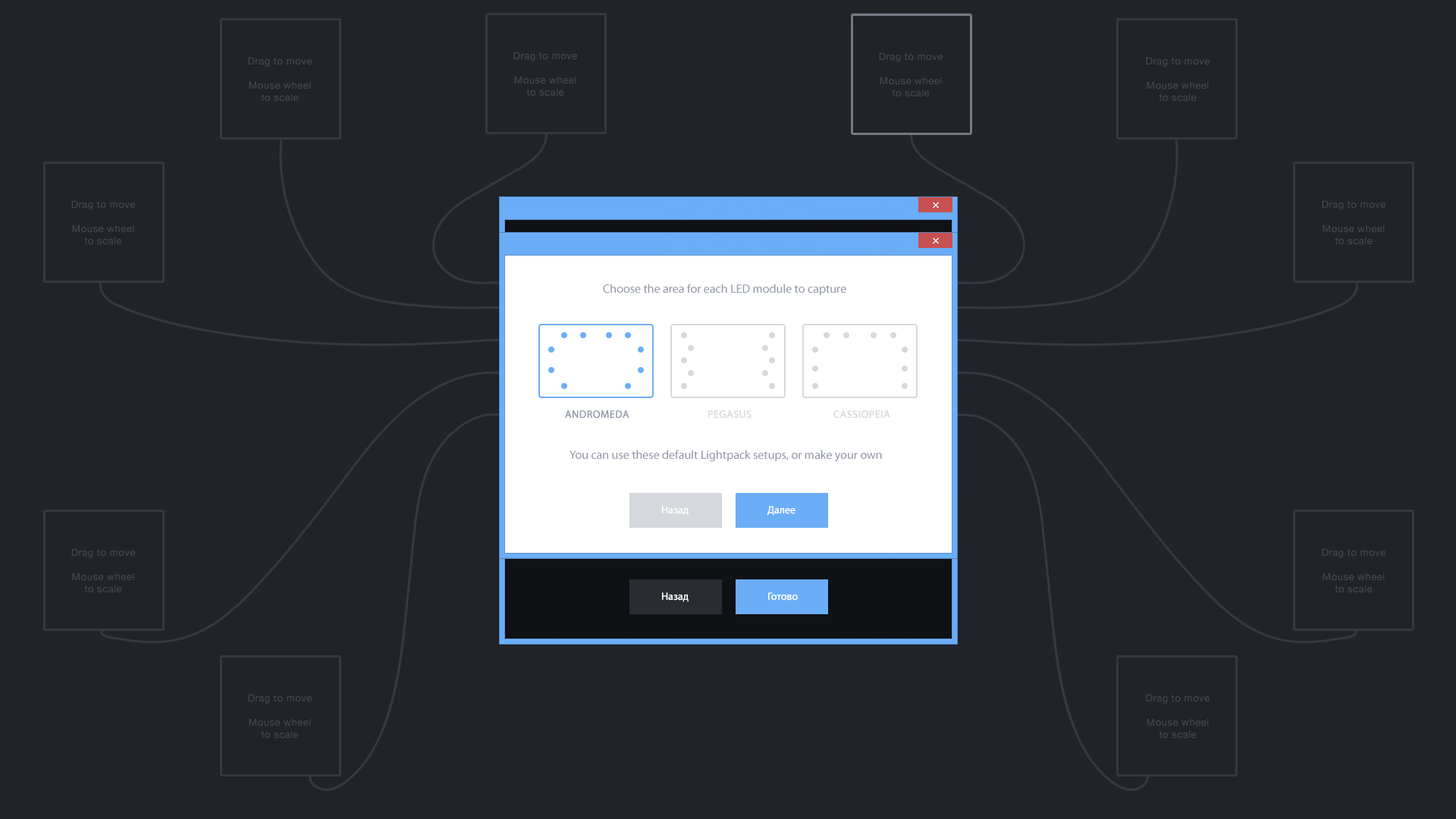
<style>
.page{position:relative;width:1456px;height:819px;background:#202328}
.page>*{position:absolute;margin:0}
.t1{font:9.9px/4.5px "HelveticaNeue";letter-spacing:0.04em;color:#444952}
.t2{font:12.1px "MyriadPro-Regular";color:#8f96a4}
.t3{font:10.6px "MyriadPro-Regular";letter-spacing:0.04em;color:#8f96a4;text-transform:uppercase}
.t4{font:10.6px "MyriadPro-Regular";letter-spacing:0.04em;color:#d5d8dd;text-transform:uppercase}
.t5{font:10.6px "MyriadPro-Regular";color:#ffffff}
</style>
<div class="page">
<p class="t1" style="left:513px;top:52px;width:64px;height:44px;text-align:center">Drag to move<br><br>Mouse wheel<br>to scale</p>
<p class="t1" style="left:879px;top:52px;width:64px;height:45px;text-align:center">Drag to move<br><br>Mouse wheel<br>to scale</p>
<p class="t1" style="left:248px;top:57px;width:64px;height:45px;text-align:center">Drag to move<br><br>Mouse wheel<br>to scale</p>
<p class="t1" style="left:1146px;top:57px;width:64px;height:45px;text-align:center">Drag to move<br><br>Mouse wheel<br>to scale</p>
<p class="t1" style="left:71px;top:200px;width:64px;height:45px;text-align:center">Drag to move<br><br>Mouse wheel<br>to scale</p>
<p class="t1" style="left:1322px;top:200px;width:63px;height:45px;text-align:center">Drag to move<br><br>Mouse wheel<br>to scale</p>
<p class="t2" style="left:603px;top:284px;width:243px;height:12px">Choose the area for each LED module to capture</p>
<p class="t3" style="left:565px;top:410px;width:64px;height:9px">Andromeda</p>
<p class="t4" style="left:708px;top:410px;width:43px;height:9px">Pegasus</p>
<p class="t4" style="left:833px;top:410px;width:57px;height:9px">Cassiopeia</p>
<p class="t2" style="left:570px;top:450px;width:312px;height:12px">You can use these default Lightpack setups, or make your own</p>
<p class="t5" style="left:662px;top:506px;width:27px;height:10px">Назад</p>
<p class="t5" style="left:767px;top:506px;width:28px;height:10px">Далее</p>
<p class="t1" style="left:71px;top:548px;width:64px;height:45px;text-align:center">Drag to move<br><br>Mouse wheel<br>to scale</p>
<p class="t1" style="left:1322px;top:548px;width:63px;height:45px;text-align:center">Drag to move<br><br>Mouse wheel<br>to scale</p>
<p class="t5" style="left:662px;top:592px;width:27px;height:10px">Назад</p>
<p class="t5" style="left:768px;top:592px;width:30px;height:9px">Готово</p>
<p class="t1" style="left:248px;top:694px;width:64px;height:45px;text-align:center">Drag to move<br><br>Mouse wheel<br>to scale</p>
<p class="t1" style="left:1146px;top:694px;width:64px;height:45px;text-align:center">Drag to move<br><br>Mouse wheel<br>to scale</p>
</div>
